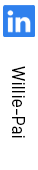
<style>
.page{position:relative;width:38px;height:170px;background:#ffffff}
.page>*{position:absolute;margin:0}
.t1{font:18.2px "SFCompactDisplay-Regular";color:#000000}
</style>
<div class="page">
<p class="t1" style="left:12px;top:66px;width:13px;height:72px;rotate:90deg">Willie-Pai</p>
</div>
